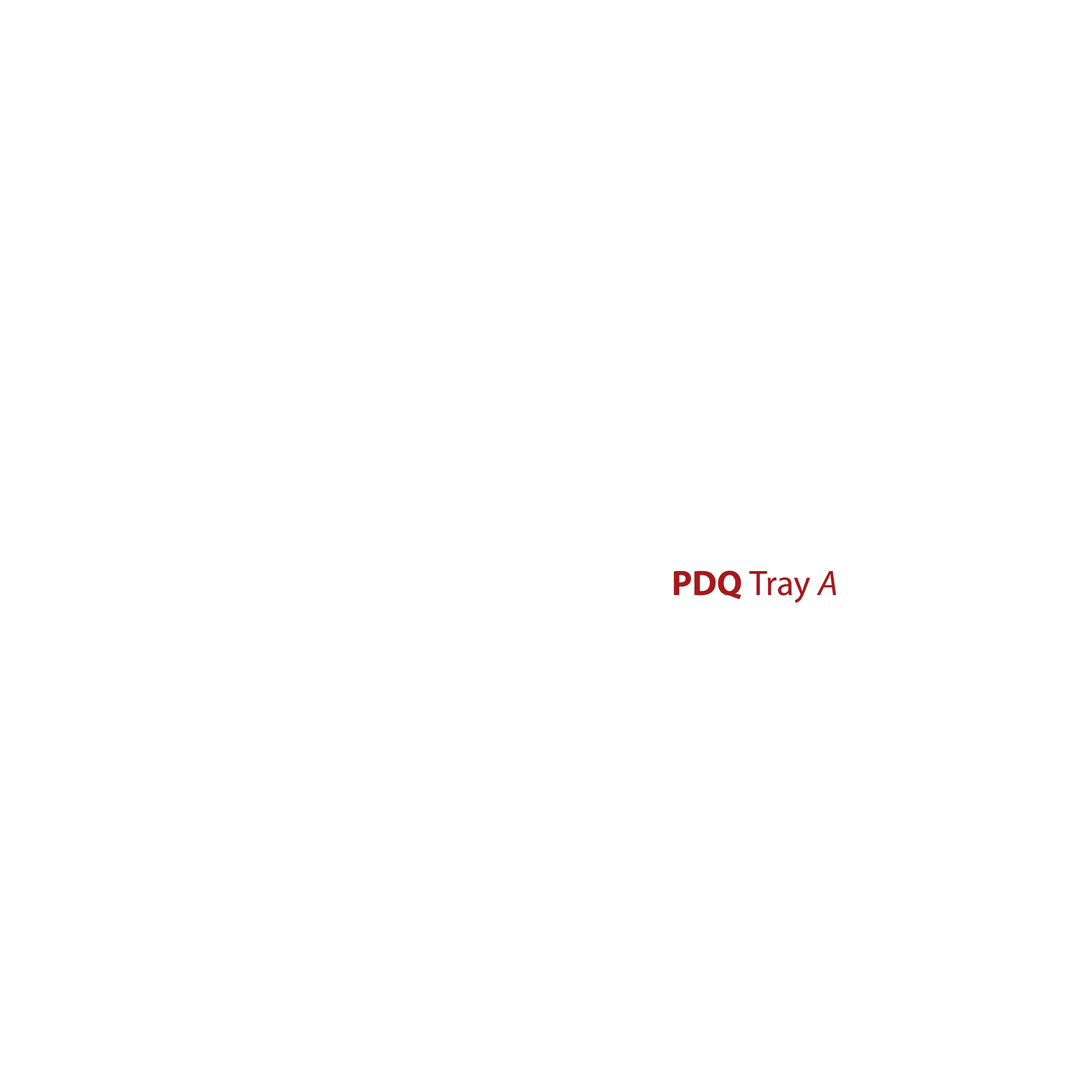
<style>
.page{position:relative;width:1092px;height:1092px;background:#ffffff}
.page>*{position:absolute;margin:0}
.t1{font:35.5px "MyriadPro-Regular";color:#a41a1e}
.t2{font:35.5px "MyriadPro-Bold";color:#a41a1e}
.t3{font:35.5px "MyriadPro-It";color:#a41a1e}
</style>
<div class="page">
<p class="t1" style="left:673px;top:571px;width:163px;height:32px"><span class="t2">PDQ </span>Tray <span class="t3">A</span></p>
</div>
